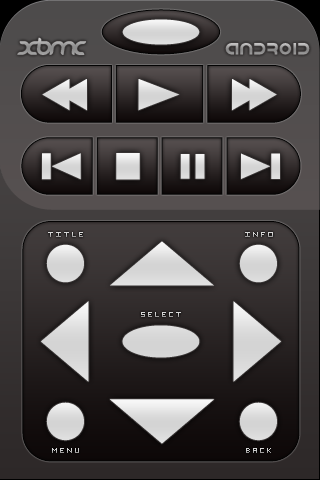
<style>
.page{position:relative;width:320px;height:480px}
.page>*{position:absolute;margin:0}
.t1{font:9px "Eichante"}
</style>
<div class="page">
<p class="t1" style="left:48px;top:232px;width:35px;height:5px">TITLE</p>
<p class="t1" style="left:245px;top:232px;width:28px;height:5px">INFO</p>
<p class="t1" style="left:141px;top:312px;width:40px;height:5px">SELECT</p>
<p class="t1" style="left:52px;top:448px;width:27px;height:5px">MENU</p>
<p class="t1" style="left:246px;top:448px;width:25px;height:5px">BACK</p>
</div>
